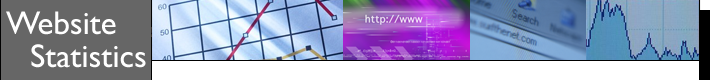
<style>
.page{position:relative;width:710px;height:80px;background:#ffffff}
.page>*{position:absolute;margin:0}
.t1{font:33px "GillSansMT";color:#ffffff}
</style>
<div class="page">
<p class="t1" style="left:6px;top:11px;width:110px;height:24px">Website</p>
<p class="t1" style="left:31px;top:44px;width:115px;height:24px">Statistics</p>
</div>
